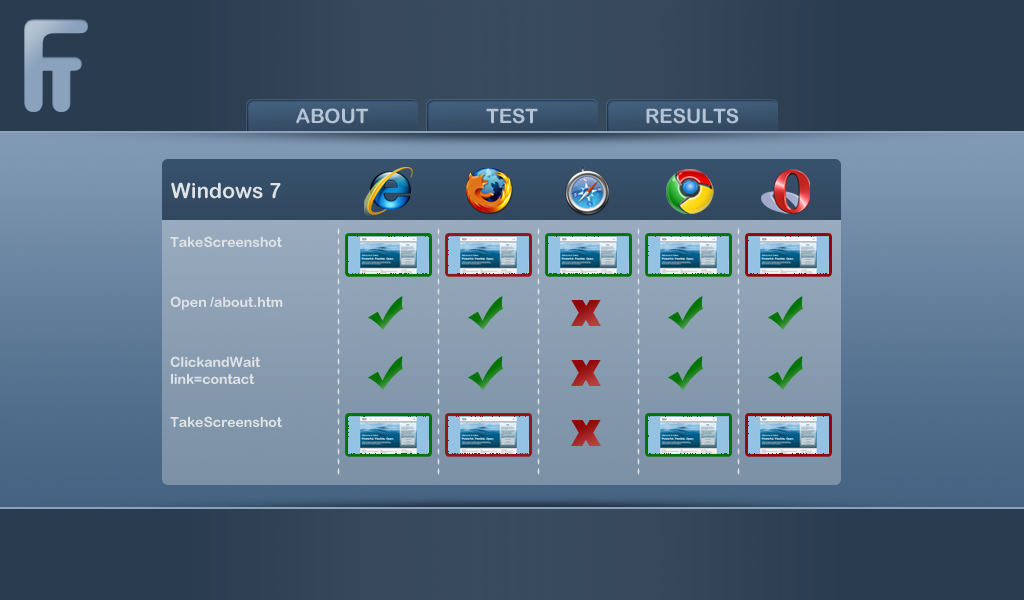
<style>
.page{position:relative;width:1024px;height:600px}
.page>*{position:absolute;margin:0}
.t1{font:20px "ArialRoundedMTBold";color:#b4c4d4}
.t2{font:21px "ArialRoundedMTBold";color:#dfe3e6}
.t3{font:14px "ArialRoundedMTBold";color:#dfe3e6}
</style>
<div class="page">
<p class="t1" style="left:296px;top:108px;width:73px;height:16px">ABOUT</p>
<p class="t1" style="left:486px;top:108px;width:52px;height:16px">TEST</p>
<p class="t1" style="left:486px;top:108px;width:52px;height:16px">TEST</p>
<p class="t1" style="left:646px;top:108px;width:93px;height:16px">RESULTS</p>
<p class="t2" style="left:171px;top:182px;width:110px;height:17px">Windows 7</p>
<p class="t3" style="left:170px;top:236px;width:112px;height:11px">TakeScreenshot</p>
<p class="t3" style="left:170px;top:296px;width:113px;height:14px">Open /about.htm</p>
<p class="t3" style="left:170px;top:356px;width:91px;height:28px">ClickandWait <br>link=contact</p>
<p class="t3" style="left:170px;top:416px;width:112px;height:11px">TakeScreenshot</p>
</div>
